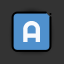
<style>
.page{position:relative;width:64px;height:64px;background:#333333}
.page>*{position:absolute;margin:0}
.t1{font:30px "Righteous-Regular";color:#ffffff}
</style>
<div class="page">
<p class="t1" style="left:23px;top:21px;width:17px;height:21px;opacity:0.95">A</p>
</div>
